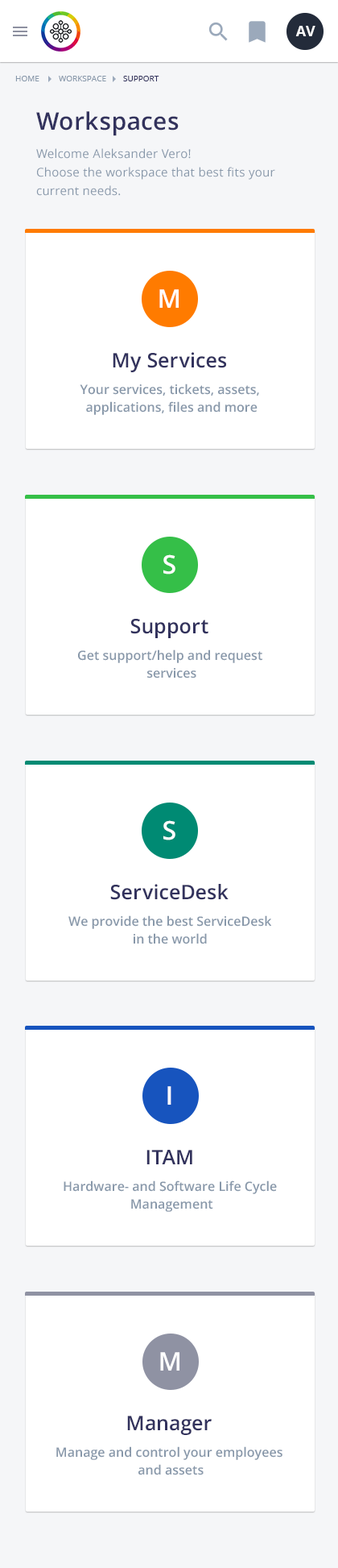
<style>
.page{position:relative;width:338px;height:1568px;background:#ffffff}
.page>*{position:absolute;margin:0}
.t1{font:14.5px "OpenSans-Bold";color:#ffffff;text-transform:uppercase}
.t2{font:8.1px "OpenSans";color:#8898aa;text-transform:uppercase}
.t3{font:8.1px "OpenSans";color:#32325d;text-transform:uppercase}
.t4{font:24.2px "OpenSans-Semibold";letter-spacing:0.02em;color:#32325d}
.t5{font:12.1px/18.5px "OpenSans";letter-spacing:0.02em;color:#8898aa}
.t6{font:25.7px "OpenSans-Semibold";letter-spacing:0.005em;color:#ffffff}
.t7{font:20.1px "OpenSans-Semibold";letter-spacing:0.005em;color:#32325d}
.t8{font:12.9px/17.7px "OpenSans-Semibold";color:#8898aa}
</style>
<div class="page">
<p class="t1" style="left:296px;top:26px;width:20px;height:10px">AV</p>
<p class="t2" style="left:15px;top:76px;width:24px;height:5px">Home</p>
<p class="t2" style="left:59px;top:76px;width:47px;height:5px">Workspace</p>
<p class="t3" style="left:123px;top:76px;width:37px;height:5px">Support</p>
<p class="t4" style="left:36px;top:111px;width:143px;height:25px">Workspaces</p>
<p class="t5" style="left:36px;top:148px;width:240px;height:48px">Welcome Aleksander Vero! <br>Choose the workspace that best fits your <br>current needs.</p>
<p class="t6" style="left:160px;top:289px;width:19px;height:19px">M</p>
<p class="t7" style="left:113px;top:352px;width:113px;height:20px">My Services</p>
<p class="t8" style="left:80px;top:384px;width:179px;height:31px;text-align:center">Your services, tickets, assets, <br>applications, files and more</p>
<p class="t6" style="left:164px;top:554px;width:12px;height:21px">S</p>
<p class="t7" style="left:131px;top:619px;width:78px;height:19px">Support</p>
<p class="t8" style="left:78px;top:649px;width:185px;height:29px;text-align:center">Get support/help and request <br>services</p>
<p class="t6" style="left:164px;top:820px;width:12px;height:20px">S</p>
<p class="t7" style="left:110px;top:884px;width:119px;height:16px">ServiceDesk</p>
<p class="t8" style="left:68px;top:915px;width:204px;height:29px;text-align:center">We provide the best ServiceDesk<br>in the world</p>
<p class="t6" style="left:168px;top:1086px;width:4px;height:19px">I</p>
<p class="t7" style="left:147px;top:1150px;width:46px;height:14px">ITAM</p>
<p class="t8" style="left:64px;top:1180px;width:213px;height:32px;text-align:center">Hardware- and Software Life Cycle <br>Management</p>
<p class="t6" style="left:160px;top:1352px;width:20px;height:19px">M</p>
<p class="t7" style="left:127px;top:1416px;width:85px;height:19px">Manager</p>
<p class="t8" style="left:56px;top:1446px;width:227px;height:29px;text-align:center">Manage and control your employees <br>and assets</p>
</div>
